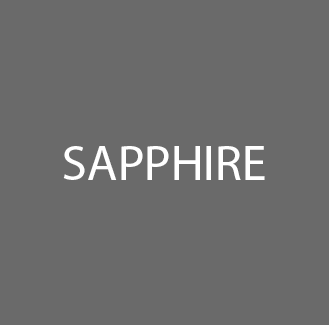
<style>
.page{position:relative;width:329px;height:325px;background:#6a6a6a}
.page>*{position:absolute;margin:0}
.t1{font:50px "MyriadPro-Regular";color:#ffffff}
</style>
<div class="page">
<p class="t1" style="left:63px;top:146px;width:202px;height:34px">SAPPHIRE</p>
</div>
